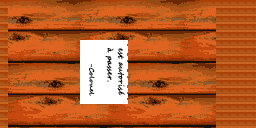
<style>
.page{position:relative;width:256px;height:128px}
.page>*{position:absolute;margin:0}
.t1{font:7.7px/11px "SegoeScript";letter-spacing:0.05em;color:#000000;font-weight:bold;scale:0.88 1}
.t2{font:6.3px "SegoeScript";letter-spacing:0.05em;color:#000000;font-weight:bold}
</style>
<div class="page">
<p class="t1" style="left:105px;top:48px;width:20px;height:48px;rotate:90deg">est autorisé<br>à passer.</p>
<p class="t2" style="left:89px;top:64px;width:6px;height:32px;rotate:90deg">-Colonel</p>
</div>
